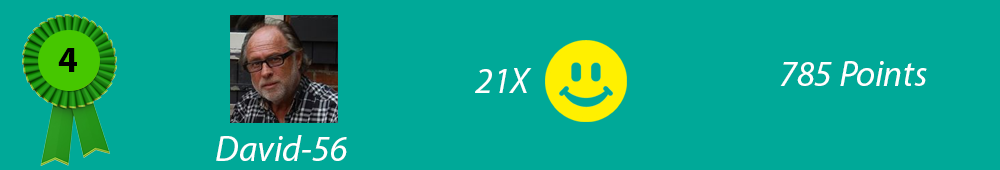
<style>
.page{position:relative;width:1000px;height:170px;background:#00a998}
.page>*{position:absolute;margin:0}
.t1{font:36px "MyriadPro-Bold";color:#000000}
.t2{font:36px "MyriadPro-It";color:#ffffff}
</style>
<div class="page">
<p class="t1" style="left:58px;top:48px;width:19px;height:24px">4</p>
<p class="t2" style="left:780px;top:61px;width:147px;height:25px">785 Points</p>
<p class="t2" style="left:475px;top:68px;width:57px;height:25px">21X</p>
<p class="t2" style="left:216px;top:135px;width:131px;height:26px">David-56</p>
</div>
